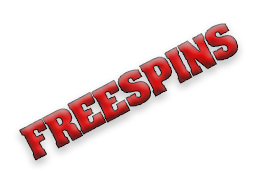
<style>
.page{position:relative;width:270px;height:180px;background:#ffffff}
.page>*{position:absolute;margin:0}
.t1{font:37.5px "Dirty-Old-Town"}
</style>
<div class="page">
<p class="t1" style="left:19px;top:23px;width:219px;height:138px;rotate:-28deg">FREESPINS</p>
</div>
